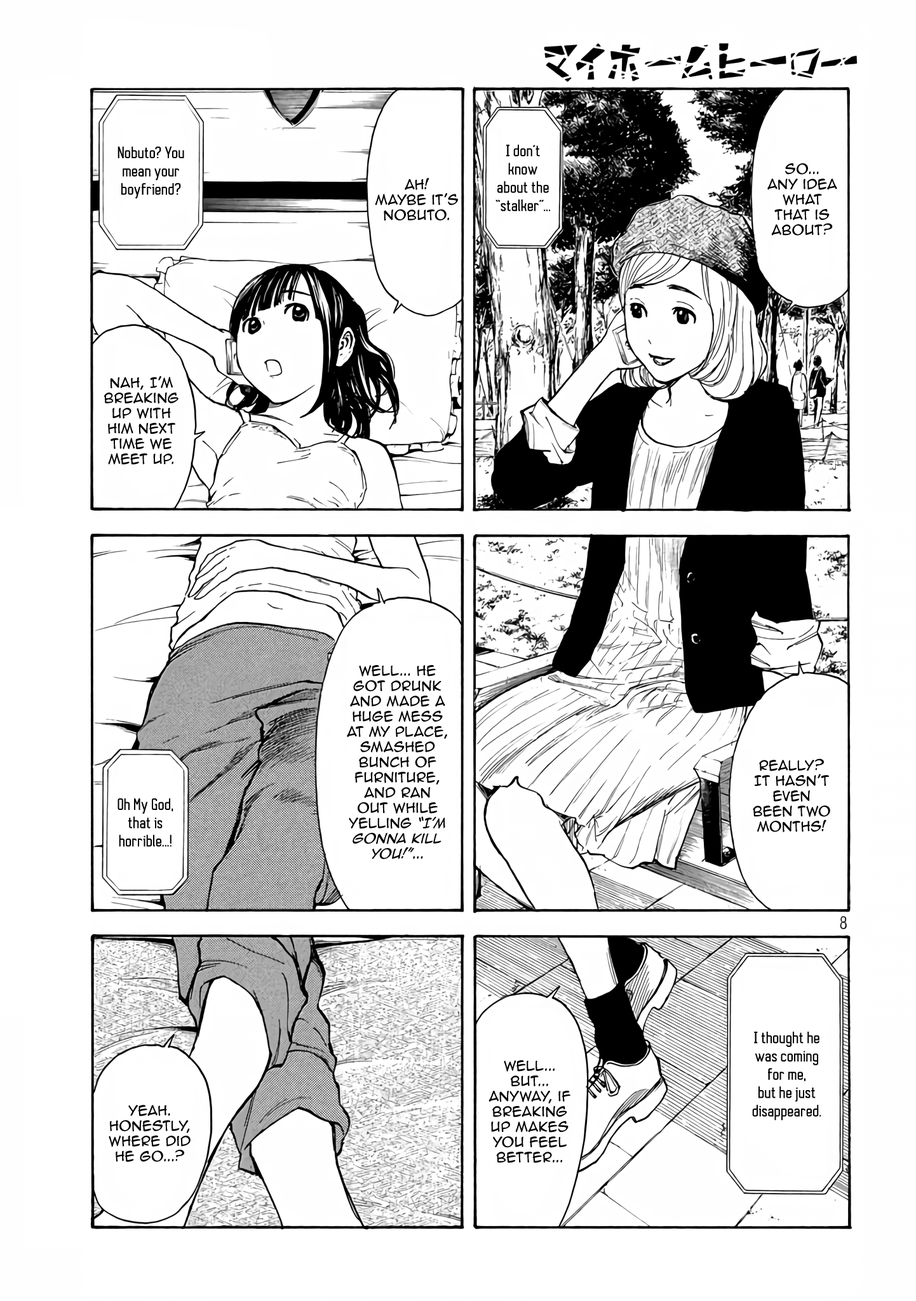
<style>
.page{position:relative;width:916px;height:1301px;background:#ffffff}
.page>*{position:absolute;margin:0}
.t1{font:15.3px "AutobusBold";color:#000000}
.t2{font:12.7px "AnimeAce2.0BB";color:#000000}
.t3{font:12.7px "AnimeAce2.0BB-Italic";color:#000000}
</style>
<div class="page">
<p class="t1" style="left:118px;top:146px;width:66px;height:53px;text-align:center">Nobuto? You mean your boyfriend?</p>
<p class="t1" style="left:496px;top:144px;width:54px;height:68px;text-align:center">I don’t know about the “stalker”...</p>
<p class="t2" style="left:768px;top:163px;width:69px;height:73px;text-align:center">So... Any idea what that is about?</p>
<p class="t2" style="left:375px;top:178px;width:83px;height:43px;text-align:center">Ah!<br>Maybe it’s Nobuto.</p>
<p class="t2" style="left:104px;top:376px;width:75px;height:89px;text-align:center">Nah, I’m breaking up with him next time we meet up.</p>
<p class="t2" style="left:347px;top:665px;width:100px;height:195px;text-align:center">Well... He got drunk and made a huge mess at my place, smashed bunch of furniture, and ran out while yelling <span class="t3">“I’m gonna kill you!”</span>...</p>
<p class="t2" style="left:753px;top:759px;width:78px;height:73px;text-align:center">Really? It hasn’t even been two months!</p>
<p class="t1" style="left:118px;top:798px;width:55px;height:49px;text-align:center">Oh My God, that is horrible...!</p>
<p class="t1" style="left:752px;top:1032px;width:70px;height:89px;text-align:center">I thought he was coming for me, but he just disappeared.</p>
<p class="t2" style="left:489px;top:1061px;width:82px;height:102px;text-align:center">Well... but... anyway, if breaking up makes you feel better...</p>
<p class="t2" style="left:109px;top:1105px;width:82px;height:57px;text-align:center">Yeah. Honestly, where did he go...?</p>
</div>
